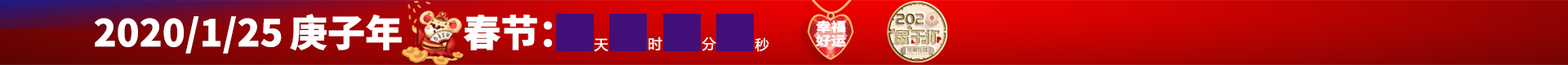
<style>
.page{position:relative;width:1568px;height:65px}
.page>*{position:absolute;margin:0}
.t1{font:37.3px "SourceHanSansCN-Heavy";color:#ffffff}
.t2{font:15.9px "PangMenZhengDao";text-transform:uppercase;scale:0.86 1}
.t3{font:12.6px/14.1px "SourceHanSansCN-Heavy";color:#ffffff;scale:1.2 1}
.t4{font:19.6px "PangMenZhengDao";text-transform:uppercase;scale:0.82 1}
.t5{font:13.9px "MicrosoftYaHei";color:#ffffff}
.t6{font:6.2px "PangMenZhengDao";color:#998457;text-transform:uppercase;scale:0.9 1}
</style>
<div class="page">
<p class="t1" style="left:95px;top:14px;width:457px;height:40px">2020/1/25 庚子年       春节：</p>
<p class="t2" style="left:897px;top:13px;width:36px;height:11px">2020</p>
<p class="t3" style="left:816px;top:20px;width:30px;height:27px;text-align:center">幸福<br>好运</p>
<p class="t4" style="left:896px;top:29px;width:44px;height:15px">鼠于你</p>
<p class="t5" style="left:594px;top:38px;width:14px;height:14px">天</p>
<p class="t5" style="left:648px;top:37px;width:14px;height:14px">时</p>
<p class="t5" style="left:702px;top:37px;width:14px;height:14px">分</p>
<p class="t5" style="left:755px;top:38px;width:14px;height:14px">秒</p>
<p class="t6" style="left:907px;top:48px;width:21px;height:5px">乐哥在线</p>
</div>
